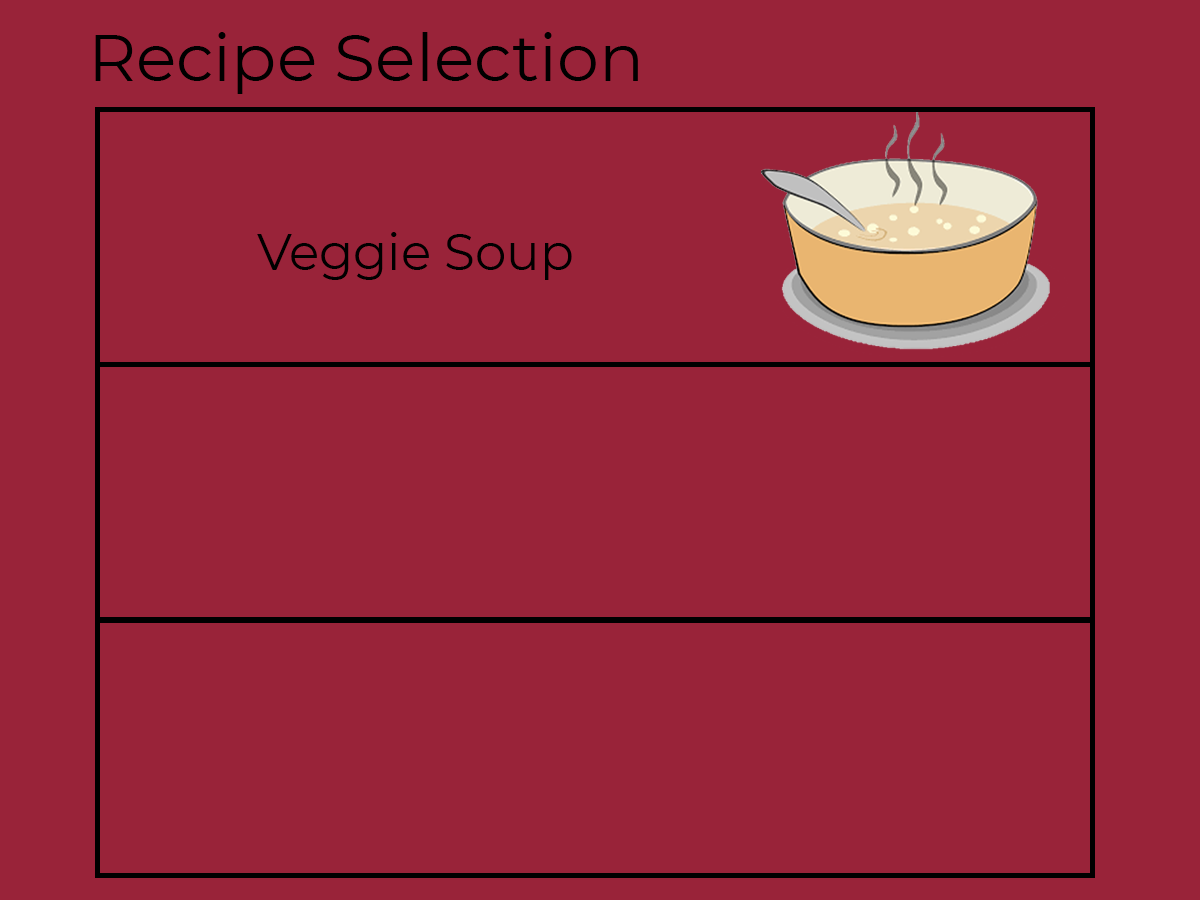
<style>
.page{position:relative;width:1200px;height:900px;background:#992339}
.page>*{position:absolute;margin:0}
.t1{font:66.7px "Montserrat-Regular";color:#000000}
.t2{font:50px "Montserrat-Regular";color:#000000}
</style>
<div class="page">
<p class="t1" style="left:95px;top:32px;width:543px;height:62px">Recipe Selection</p>
<p class="t2" style="left:257px;top:232px;width:315px;height:48px">Veggie Soup</p>
</div>
